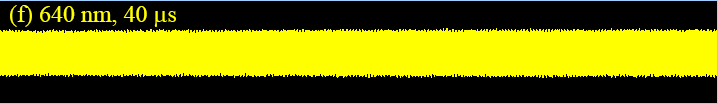
<style>
.page{position:relative;width:718px;height:104px;background:#000000}
.page>*{position:absolute;margin:0}
.t1{font:24px "TimesNewRomanPSMT";color:#ffff00}
.t2{font:24px "SymbolMT";color:#ffff00}
</style>
<div class="page">
<p class="t1" style="left:10px;top:5px;width:166px;height:22px">(f) 640 nm, 40 <span class="t2">m</span>s</p>
</div>
